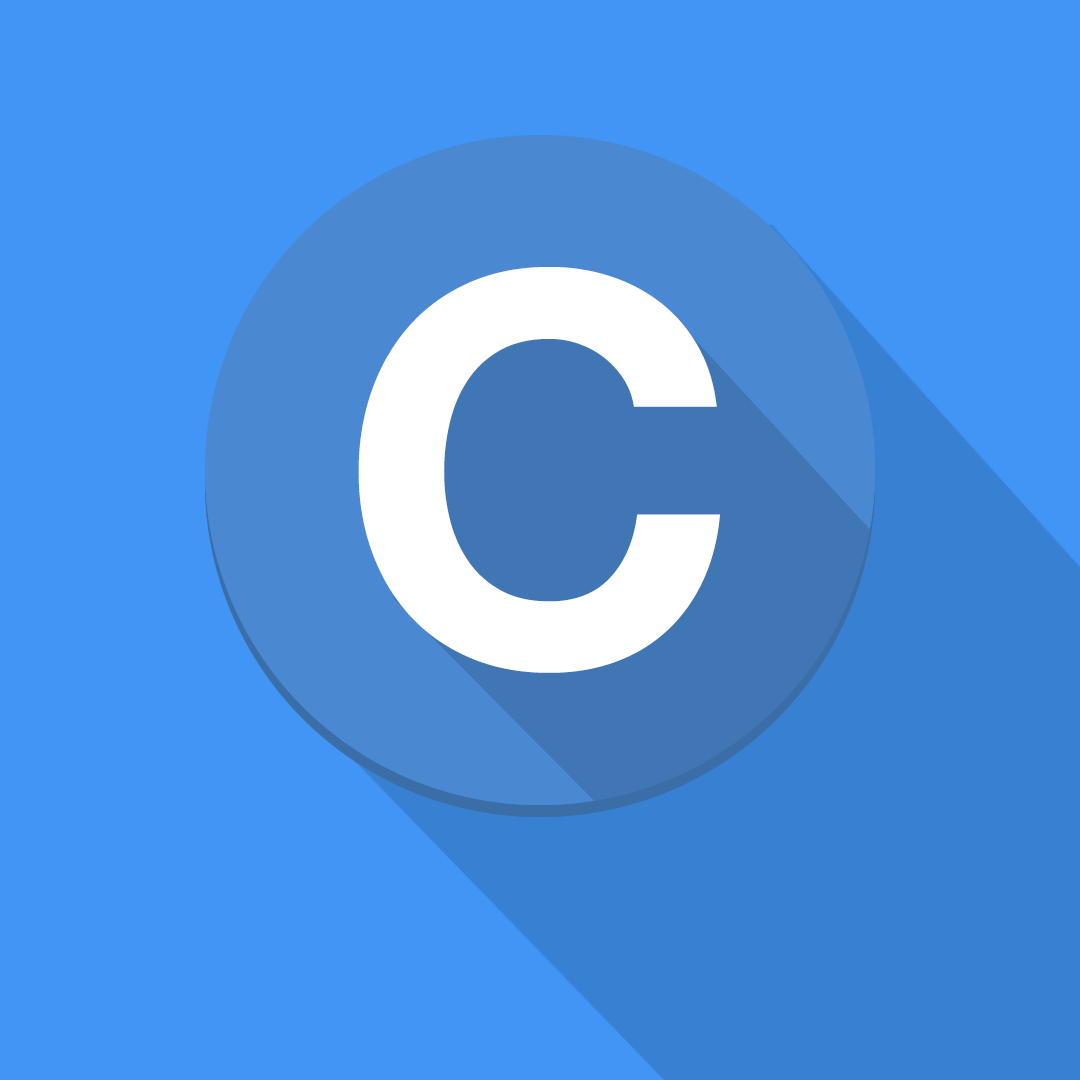
<style>
.page{position:relative;width:1080px;height:1080px;background:#4095f5}
.page>*{position:absolute;margin:0}
.t1{font:543.1px "HelveticaNeue-Bold";color:#ffffff}
</style>
<div class="page">
<p class="t1" style="left:358px;top:267px;width:362px;height:406px">C</p>
</div>
